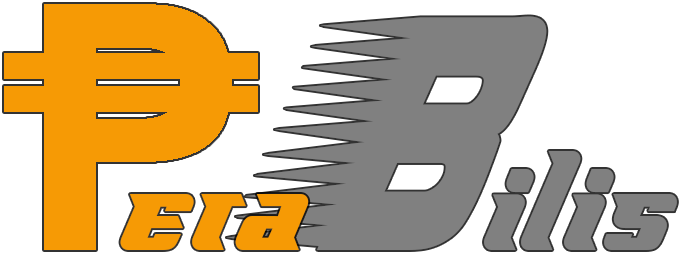
<style>
.page{position:relative;width:681px;height:255px;background:#ffffff}
.page>*{position:absolute;margin:0}
.t1{font:150px "FlyboyBB";color:#808080}
.t2{font:310px "Barbatrick-Regular";color:#808080}
.t3{font:150px "FlyboyBB";color:#f69a05}
</style>
<div class="page">
<p class="t1" style="left:226px;top:16px;width:451px;height:234px"><span class="t2">B</span>ilis</p>
<p class="t3" style="left:120px;top:194px;width:189px;height:56px">era</p>
</div>
